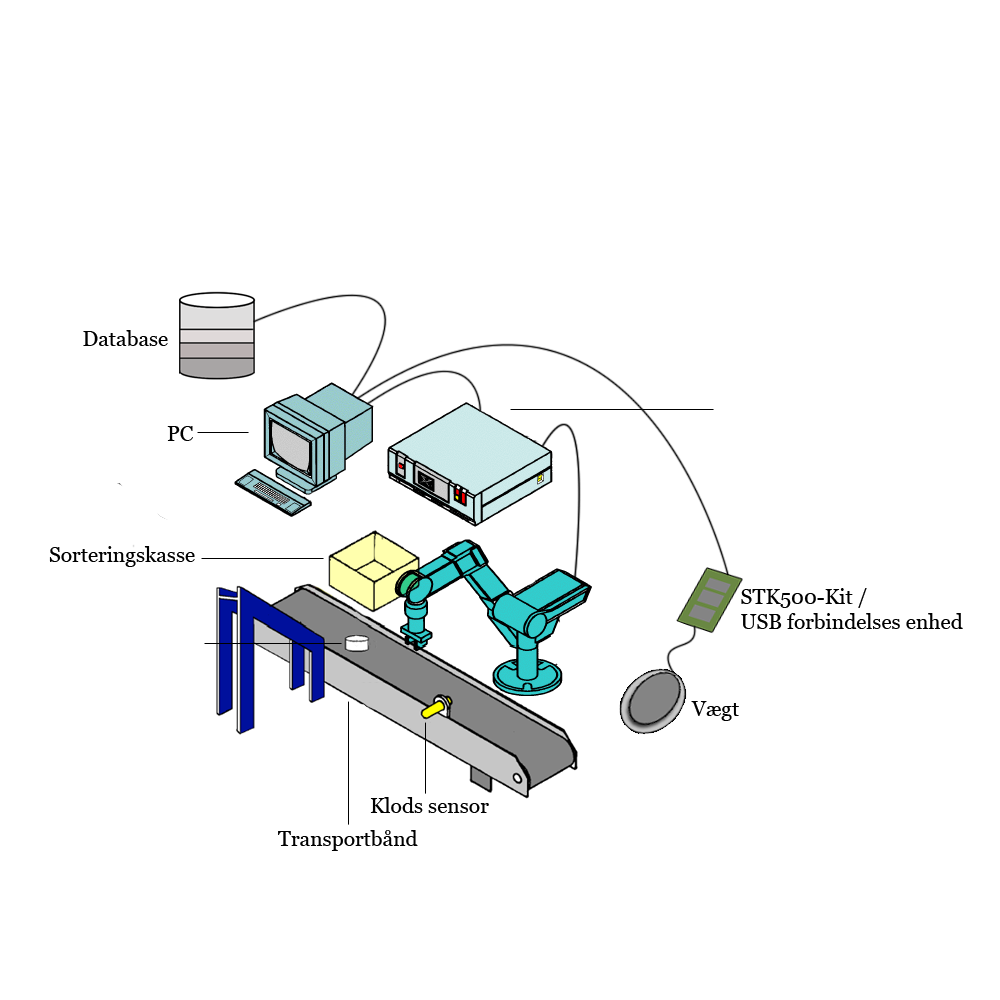
<style>
.page{position:relative;width:1000px;height:1000px;background:#ffffff}
.page>*{position:absolute;margin:0}
.t1{font:21px "Vani";color:#000000}
</style>
<div class="page">
<p class="t1" style="left:83px;top:330px;width:85px;height:16px">Database</p>
<p class="t1" style="left:167px;top:426px;width:26px;height:15px">PC</p>
<p class="t1" style="left:49px;top:546px;width:146px;height:21px">Sorteringskasse</p>
<p class="t1" style="left:741px;top:588px;width:222px;height:41px">STK500-Kit /<br>USB forbindelses enhed</p>
<p class="t1" style="left:691px;top:701px;width:48px;height:20px">Vægt</p>
<p class="t1" style="left:370px;top:797px;width:119px;height:16px">Klods sensor</p>
<p class="t1" style="left:278px;top:830px;width:140px;height:21px">Transportbånd</p>
</div>
